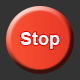
<style>
.page{position:relative;width:80px;height:80px;background:#333333}
.page>*{position:absolute;margin:0}
.t1{font:18px "Arial-BoldMT";color:#ffffff}
</style>
<div class="page">
<p class="t1" style="left:20px;top:32px;width:40px;height:17px">Stop</p>
</div>
